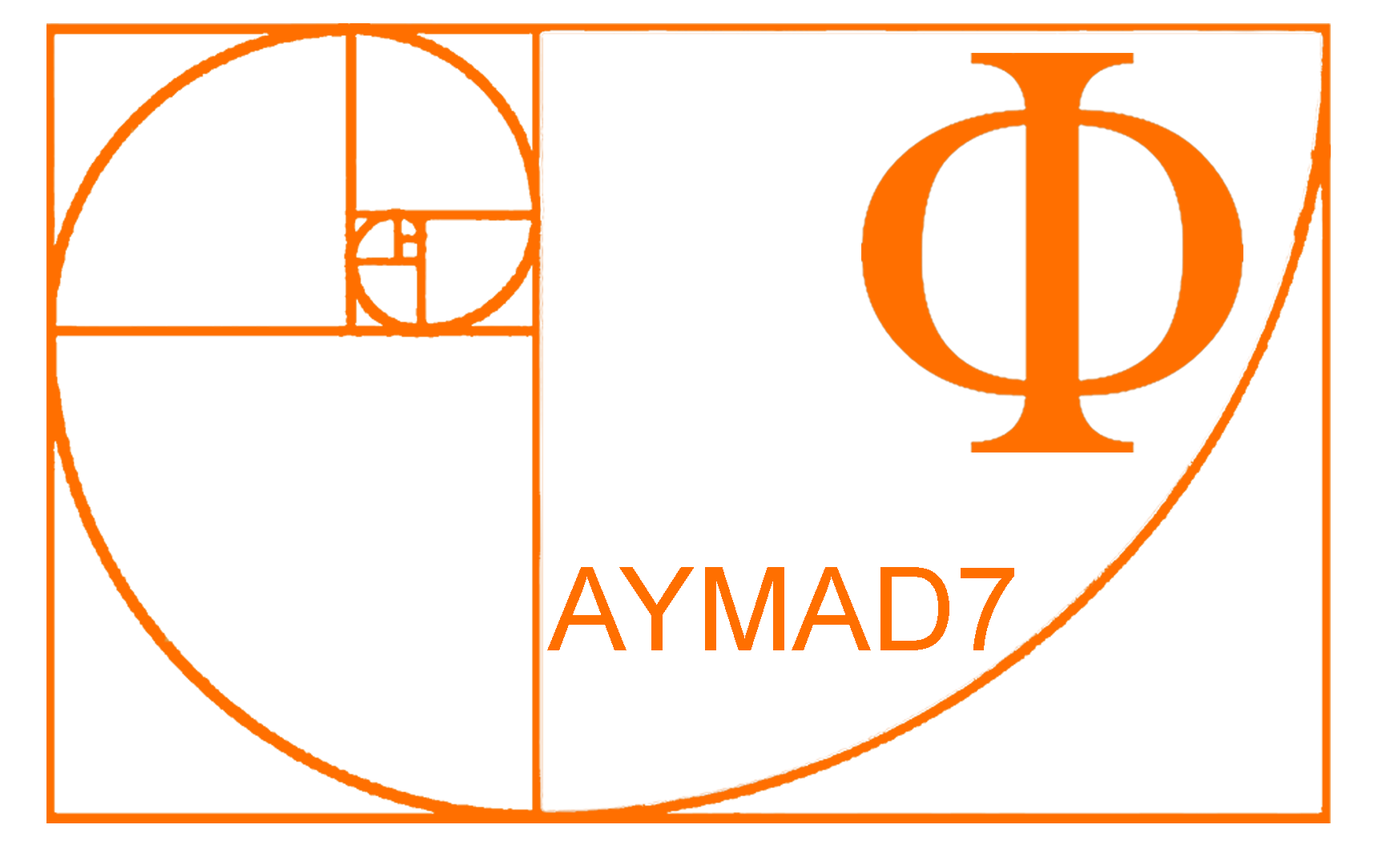
<style>
.page{position:relative;width:1378px;height:865px;background:#ffffff}
.page>*{position:absolute;margin:0}
.t1{font:116.5px "ArialMT";color:#ff6f00}
</style>
<div class="page">
<p class="t1" style="left:547px;top:567px;width:467px;height:84px">AYMAD7</p>
</div>
